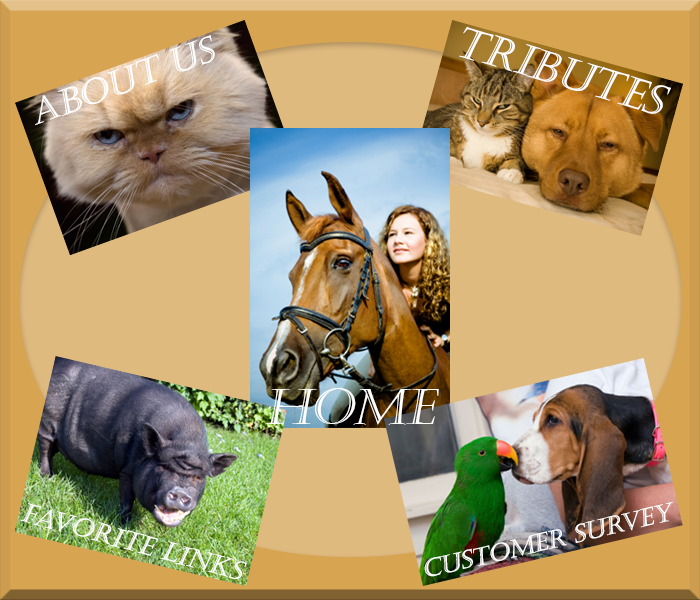
<style>
.page{position:relative;width:700px;height:600px;background:#dfba7f}
.page>*{position:absolute;margin:0}
.t1{font:41.7px "Castellar";color:#ffffff;font-style:italic}
.t2{font:34.3px "Castellar";color:#ffffff;font-style:italic}
.t3{font:50px "Castellar";color:#ffffff;font-style:italic}
.t4{font:25.7px "Castellar";color:#ffffff;font-style:italic}
.t5{font:24.1px "Castellar";color:#ffffff;font-style:italic}
</style>
<div class="page">
<p class="t1" style="left:459px;top:26px;width:212px;height:88px;rotate:17deg">Tributes</p>
<p class="t2" style="left:35px;top:35px;width:180px;height:91px;rotate:-20deg">About Us</p>
<p class="t3" style="left:265px;top:388px;width:174px;height:37px">Home</p>
<p class="t4" style="left:20px;top:503px;width:227px;height:76px;rotate:15deg">Favorite links</p>
<p class="t5" style="left:424px;top:501px;width:249px;height:76px;rotate:-13deg">Customer survey</p>
</div>
